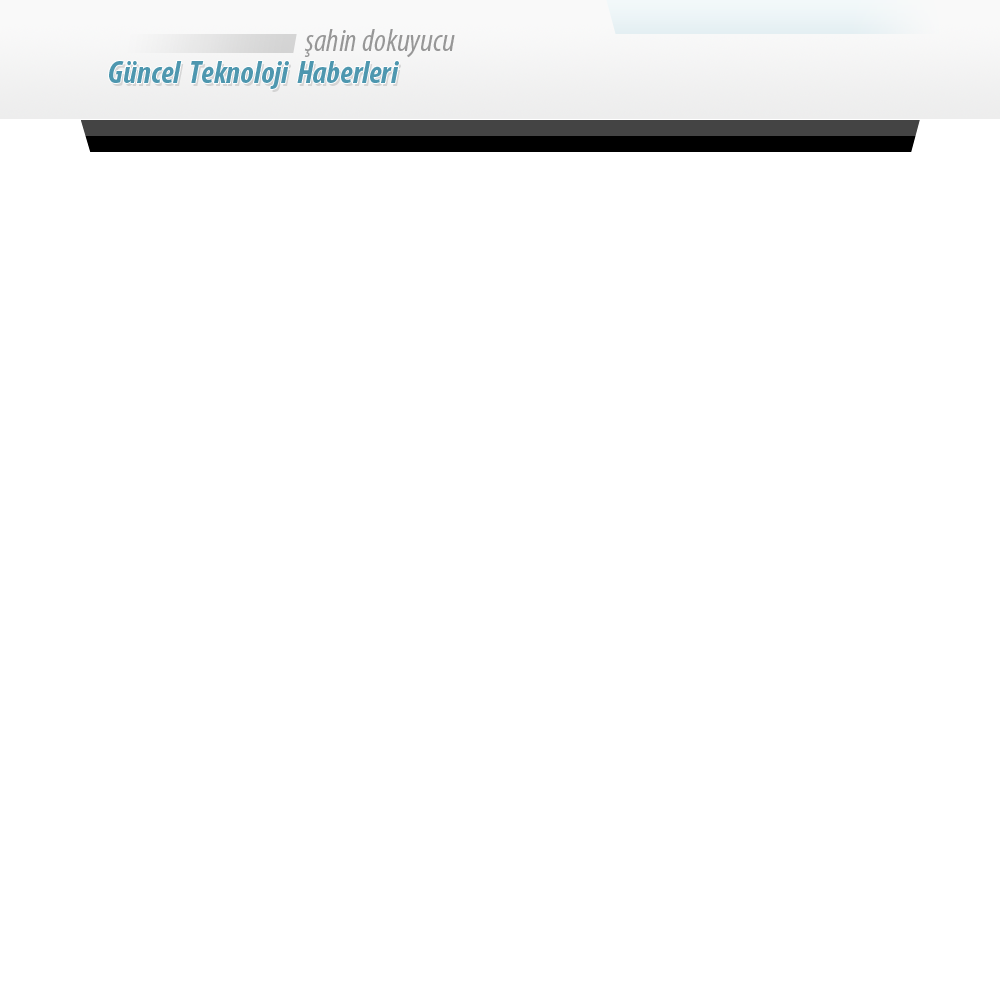
<style>
.page{position:relative;width:1000px;height:1000px;background:#ffffff}
.page>*{position:absolute;margin:0}
.t1{font:32px "MyriadPro-CondIt";color:#979797}
.t2{font:32px "MyriadPro-BoldCondIt";color:#4e97af}
</style>
<div class="page">
<p class="t1" style="left:304px;top:29px;width:151px;height:29px">şahin dokuyucu</p>
<p class="t2" style="left:109px;top:61px;width:290px;height:28px">Güncel  Teknoloji  Haberleri</p>
</div>
